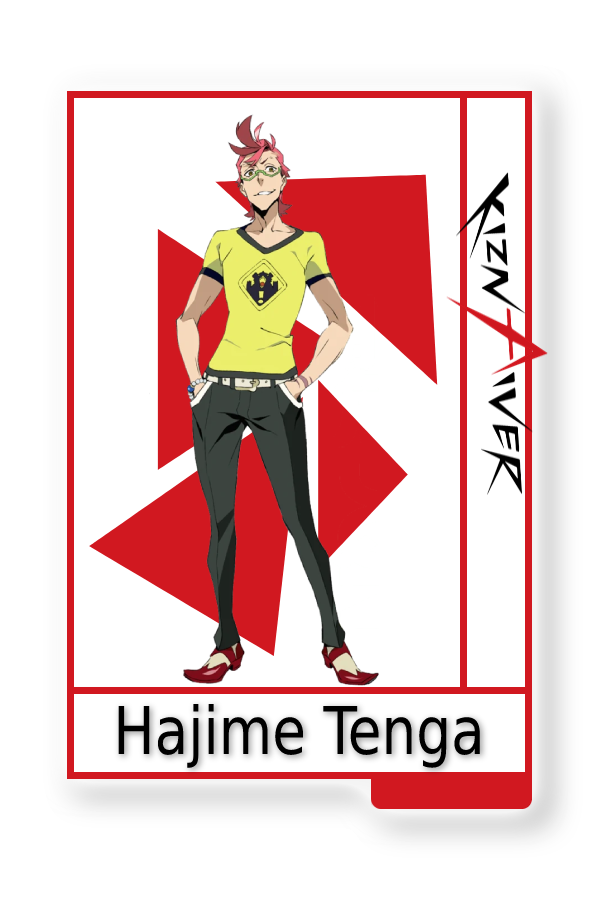
<style>
.page{position:relative;width:600px;height:900px;background:#ffffff}
.page>*{position:absolute;margin:0}
.t1{font:65.8px "CoolveticaRg-Regular";color:#000000;scale:0.84 1}
</style>
<div class="page">
<p class="t1" style="left:118px;top:704px;width:362px;height:64px">Hajime Tenga</p>
</div>
